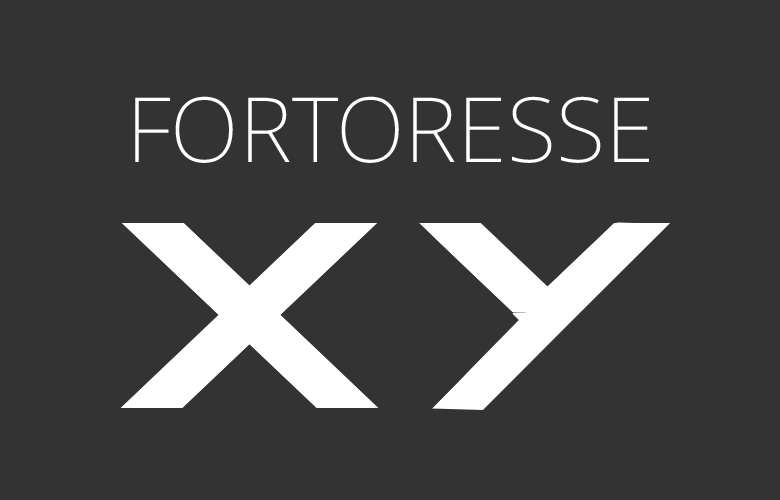
<style>
.page{position:relative;width:780px;height:500px;background:#333333}
.page>*{position:absolute;margin:0}
.t1{font:90px "NotoSans-ExtraLight";color:#ffffff}
</style>
<div class="page">
<p class="t1" style="left:135px;top:96px;width:514px;height:67px">FORTORESSE</p>
</div>
